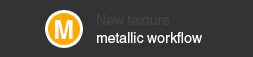
<style>
.page{position:relative;width:253px;height:57px;background:#333333}
.page>*{position:absolute;margin:0}
.t1{font:14px "Helvetica";color:#424242}
.t2{font:25.3px "Helvetica-Bold";color:#ffffff}
.t3{font:14px "Helvetica";color:#ffffff}
</style>
<div class="page">
<p class="t1" style="left:97px;top:14px;width:73px;height:11px">New texture</p>
<p class="t2" style="left:55px;top:20px;width:18px;height:19px">M</p>
<p class="t3" style="left:97px;top:32px;width:105px;height:11px">metallic workflow</p>
</div>
